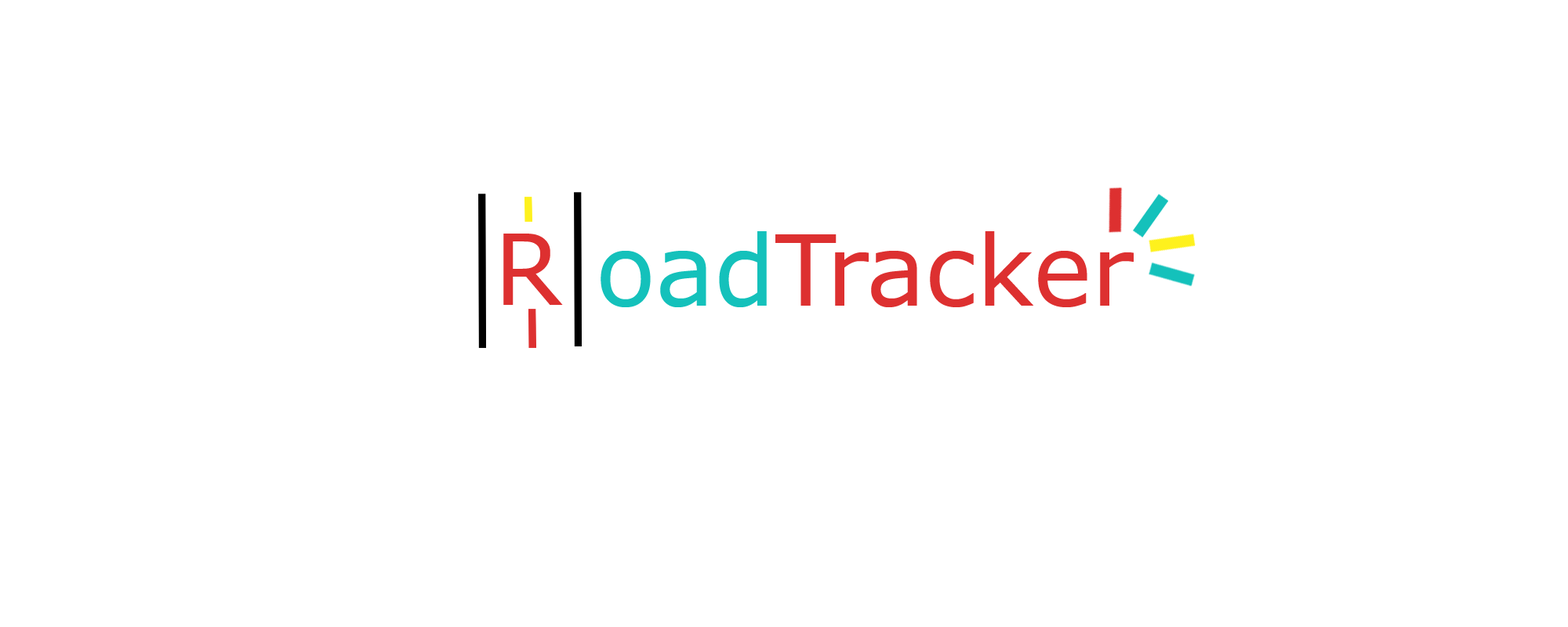
<style>
.page{position:relative;width:1568px;height:627px;background:#ffffff}
.page>*{position:absolute;margin:0}
.t1{font:98px "Verdana";color:#dd3030}
.t2{font:98px "Verdana";color:#14c1bb}
</style>
<div class="page">
<p class="t1" style="left:503px;top:234px;width:60px;height:71px">R</p>
<p class="t1" style="left:601px;top:231px;width:533px;height:76px"><span class="t2">oad</span>Tracker</p>
</div>
